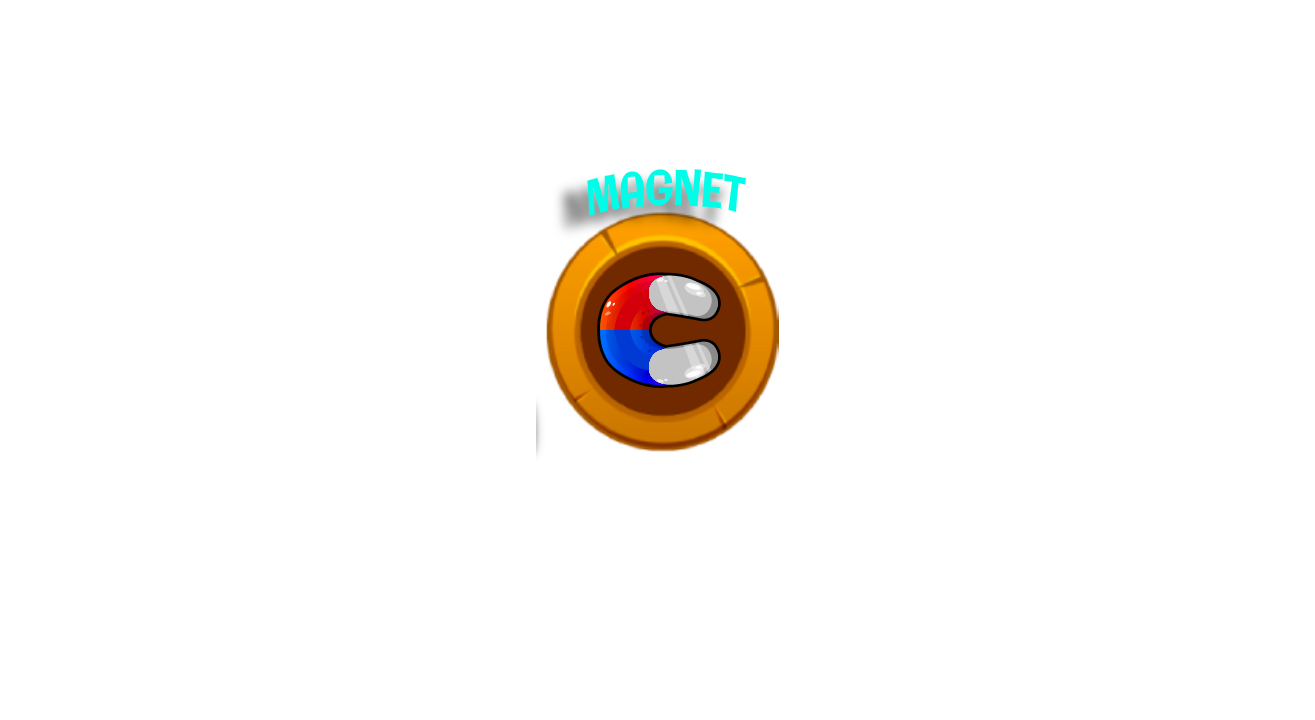
<style>
.page{position:relative;width:1315px;height:720px;background:#ffffff}
.page>*{position:absolute;margin:0}
.t1{font:47.9px "Galindo-Regular";color:#0ffde9;scale:0.71 1}
</style>
<div class="page">
<p class="t1" style="left:587px;top:169px;width:159px;height:47px">MAGNET</p>
</div>
